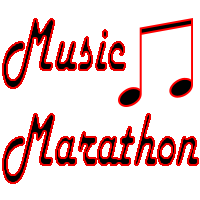
<style>
.page{position:relative;width:200px;height:200px;background:#ffffff}
.page>*{position:absolute;margin:0}
.t1{font:78.9px "HarlowSolid";letter-spacing:-0.005em;scale:0.6 1}
</style>
<div class="page">
<p class="t1" style="left:2px;top:18px;width:197px;height:166px">Music <br>Marathon</p>
</div>
